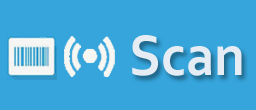
<style>
.page{position:relative;width:256px;height:110px;background:#35a5dc}
.page>*{position:absolute;margin:0}
.t1{font:60px "Corbel-Bold";color:#e6ecf4;scale:0.93 1}
</style>
<div class="page">
<p class="t1" style="left:132px;top:35px;width:110px;height:41px">Scan</p>
</div>
